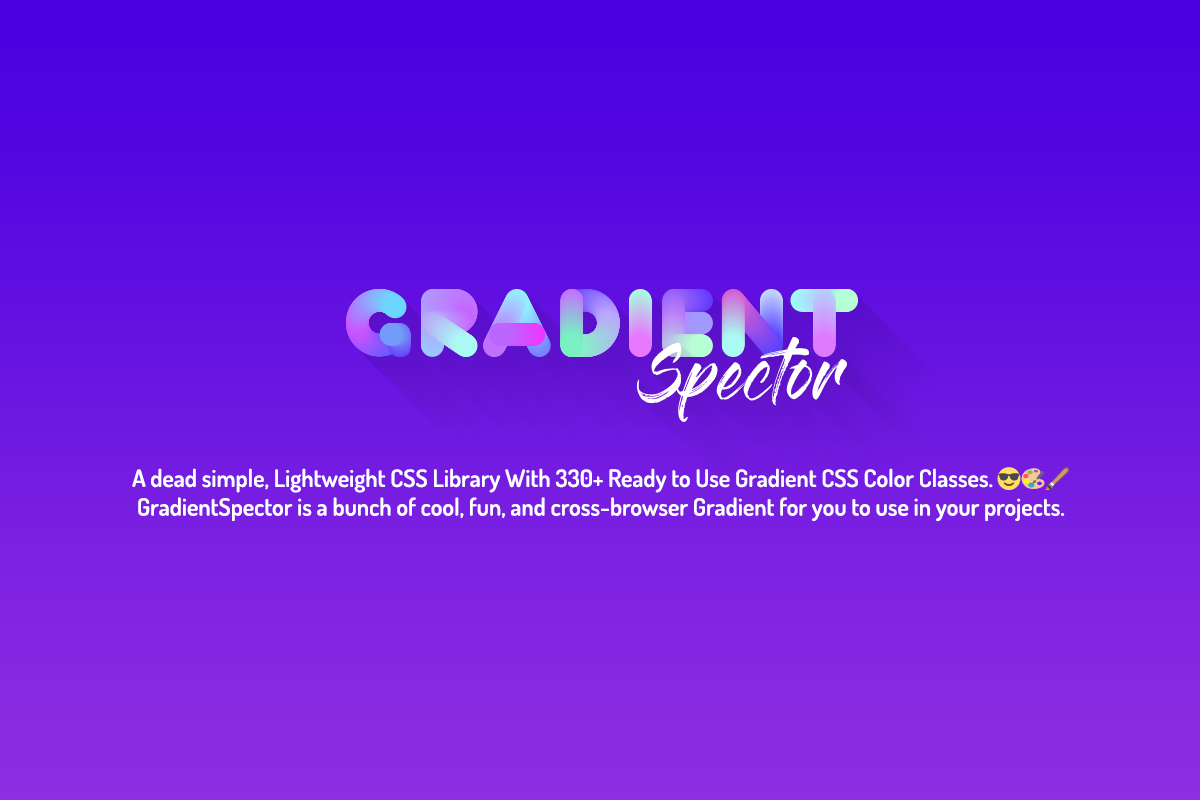
<style>
.page{position:relative;width:1200px;height:800px}
.page>*{position:absolute;margin:0}
.t1{font:23.9px "Dosis-SemiBold";color:#ffffff}
.t2{font:23.9px "EmojiOneColor";color:#ffffff}
</style>
<div class="page">
<p class="t1" style="left:132px;top:467px;width:937px;height:55px;text-align:center">A dead simple, Lightweight CSS Library With 330+ Ready to Use Gradient CSS Color Classes. <span class="t2">😎🎨🖌</span><br>GradientSpector is a bunch of cool, fun, and cross-browser Gradient for you to use in your projects.</p>
</div>
